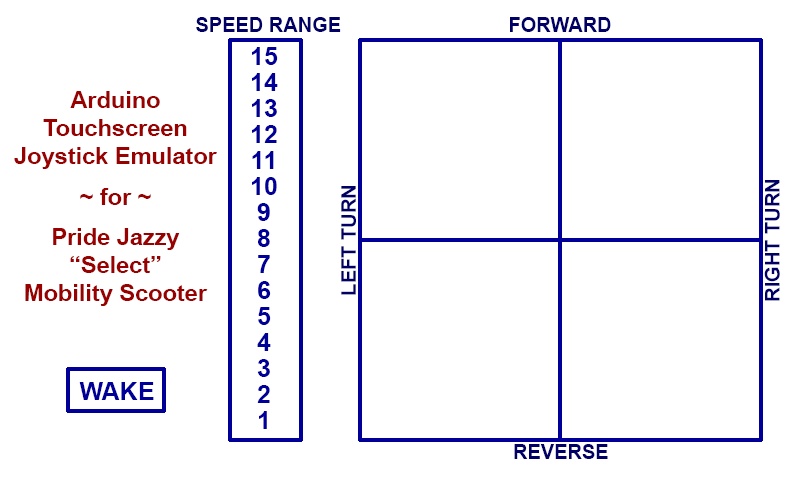
<style>
.page{position:relative;width:800px;height:480px;background:#ffffff}
.page>*{position:absolute;margin:0}
.t1{font:20px "Arial-BoldMT";color:#000066}
.t2{font:25px/26px "Arial-BoldMT";color:#000099}
.t3{font:23.4px "Arial-BoldMT";color:#990000}
.t4{font:25px "Arial-BoldMT";color:#000099}
</style>
<div class="page">
<p class="t1" style="left:196px;top:17px;width:145px;height:15px">SPEED RANGE</p>
<p class="t1" style="left:510px;top:17px;width:101px;height:15px">FORWARD</p>
<p class="t2" style="left:252px;top:47px;width:26px;height:382px;text-align:center">15<br>14<br>13<br>12<br>11<br>10<br>9<br>8<br>7<br>6<br>5<br>4<br>3<br>2<br>1</p>
<p class="t3" style="left:14px;top:91px;width:203px;height:215px;text-align:center">Arduino<br>Touchscreen<br>Joystick Emulator<br><br>~ for ~<br><br>Pride Jazzy<br>“Select”<br>Mobility Scooter</p>
<p class="t1" style="left:764px;top:180px;width:16px;height:121px;rotate:-90deg">RIGHT TURN</p>
<p class="t1" style="left:341px;top:186px;width:15px;height:109px;rotate:-90deg">LEFT TURN</p>
<p class="t4" style="left:79px;top:382px;width:75px;height:18px">WAKE</p>
<p class="t1" style="left:514px;top:444px;width:94px;height:15px">REVERSE</p>
</div>
